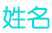
<style>
.page{position:relative;width:52px;height:33px}
.page>*{position:absolute;margin:0}
.t1{font:24px "YouYuan";color:#13d9db;font-weight:bold}
</style>
<div class="page">
<p class="t1" style="left:2px;top:5px;width:48px;height:24px">姓名</p>
</div>
